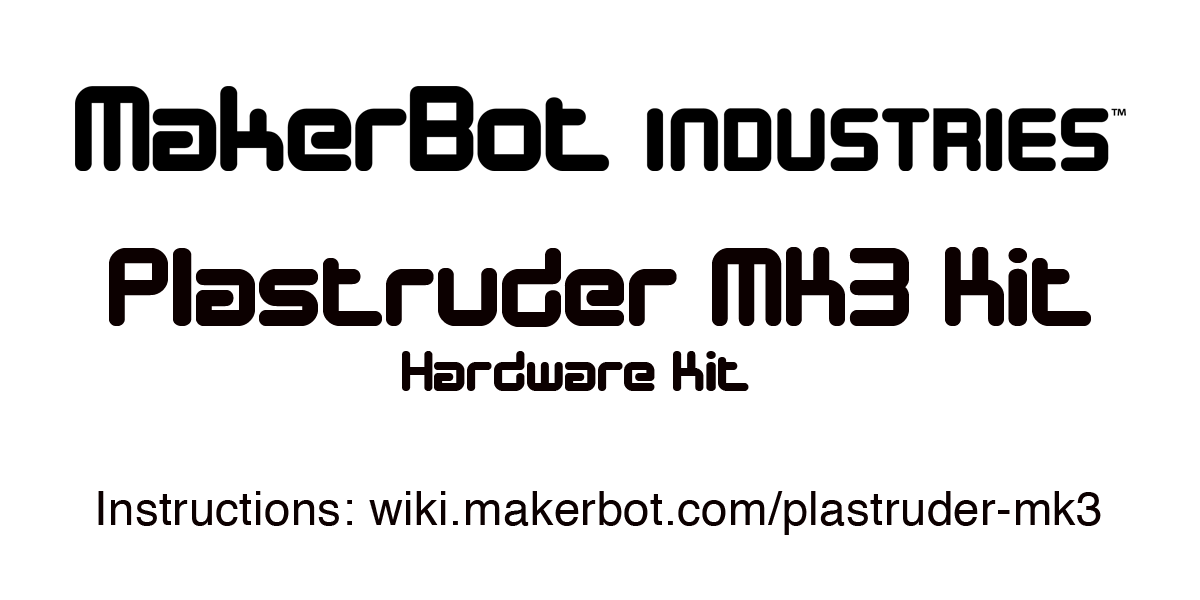
<style>
.page{position:relative;width:1200px;height:600px;background:#ffffff}
.page>*{position:absolute;margin:0}
.t1{font:114.5px "DesignerBlock";letter-spacing:0.01em;color:#0c0000}
.t2{font:59.1px "DesignerBlock";letter-spacing:0.01em;color:#0c0000}
.t3{font:47.2px "Helvetica";letter-spacing:0.01em;color:#0c0000}
</style>
<div class="page">
<p class="t1" style="left:109px;top:247px;width:982px;height:80px">Plastruder MK3 Kit</p>
<p class="t2" style="left:402px;top:351px;width:347px;height:40px">Hardware Kit</p>
<p class="t3" style="left:98px;top:491px;width:1003px;height:44px">Instructions: wiki.makerbot.com/plastruder-mk3</p>
</div>
